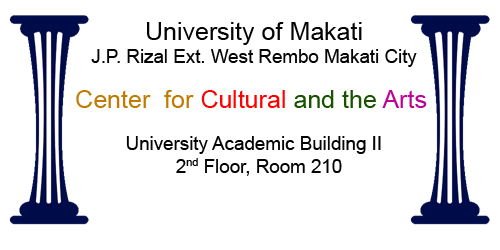
<style>
.page{position:relative;width:500px;height:250px;background:#ffffff}
.page>*{position:absolute;margin:0}
.t1{font:18.8px "ArialMT";color:#040404}
.t2{font:25px "ArialMT";color:#040404}
.t3{font:25px "ArialMT";color:#bf7b03}
.t4{font:25px "ArialMT";color:#ff0000}
.t5{font:25px "ArialMT";color:#195300}
.t6{font:25px "ArialMT";color:#bb0396}
.t7{font:18.8px "ArialMT";color:#030303}
</style>
<div class="page">
<p class="t1" style="left:91px;top:22px;width:326px;height:45px;text-align:center"><span class="t2">University of Makati<br></span>J.P. Rizal Ext. West Rembo Makati City</p>
<p class="t3" style="left:76px;top:90px;width:351px;height:18px">Center  for <span class="t4">Cultural </span><span class="t5">and the </span><span class="t6">Arts</span></p>
<p class="t7" style="left:126px;top:136px;width:255px;height:40px;text-align:center">University Academic Building II  <br>2nd Floor, Room 210</p>
</div>
